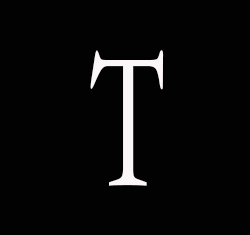
<style>
.page{position:relative;width:250px;height:235px;background:#010201}
.page>*{position:absolute;margin:0}
.t1{font:200px "STKaiti";color:#fbf6f7;scale:0.6 1}
</style>
<div class="page">
<p class="t1" style="left:90px;top:50px;width:74px;height:136px">T</p>
</div>
